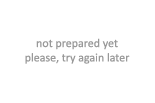
<style>
.page{position:relative;width:155px;height:103px;background:#ffffff}
.page>*{position:absolute;margin:0}
.t1{font:12px "Calibri";color:#999999}
</style>
<div class="page">
<p class="t1" style="left:25px;top:38px;width:105px;height:26px;text-align:center">not prepared yet<br>please, try again later</p>
</div>
